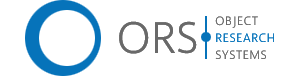
<style>
.page{position:relative;width:288px;height:76px;background:#ffffff}
.page>*{position:absolute;margin:0}
.t1{font:12px/10px "Selawik-Semilight";letter-spacing:0.05em;color:#0673ba}
.t2{font:12px/10px "Selawik-Semilight";letter-spacing:0.05em;color:#696969}
.t3{font:44px "Selawik-Semilight";color:#696969}
</style>
<div class="page">
<p class="t1" style="left:215px;top:16px;width:59px;height:43px"><span class="t2">OBJECT<br></span>RESEARCH<br><span class="t2">SYSTEMS</span></p>
<p class="t1" style="left:215px;top:16px;width:59px;height:43px"><span class="t2">OBJECT<br></span>RESEARCH<br><span class="t2">SYSTEMS</span></p>
<p class="t3" style="left:119px;top:21px;width:78px;height:33px">ORS</p>
<p class="t3" style="left:119px;top:21px;width:78px;height:33px">ORS</p>
</div>
